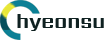
<style>
.page{position:relative;width:108px;height:40px;background:#ffffff}
.page>*{position:absolute;margin:0}
.t1{font:20px "Sarpanch-Bold";color:#0f2121}
</style>
<div class="page">
<p class="t1" style="left:17px;top:14px;width:87px;height:17px">hyeonsu</p>
</div>
